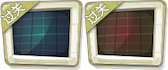
<style>
.page{position:relative;width:168px;height:70px}
.page>*{position:absolute;margin:0}
.t1{font:12px "MicrosoftYaHei";color:#f8f7f2}
</style>
<div class="page">
<p class="t1" style="left:1px;top:2px;width:25px;height:23px;rotate:-42deg">过关</p>
<p class="t1" style="left:85px;top:2px;width:25px;height:23px;rotate:-42deg">过关</p>
</div>
